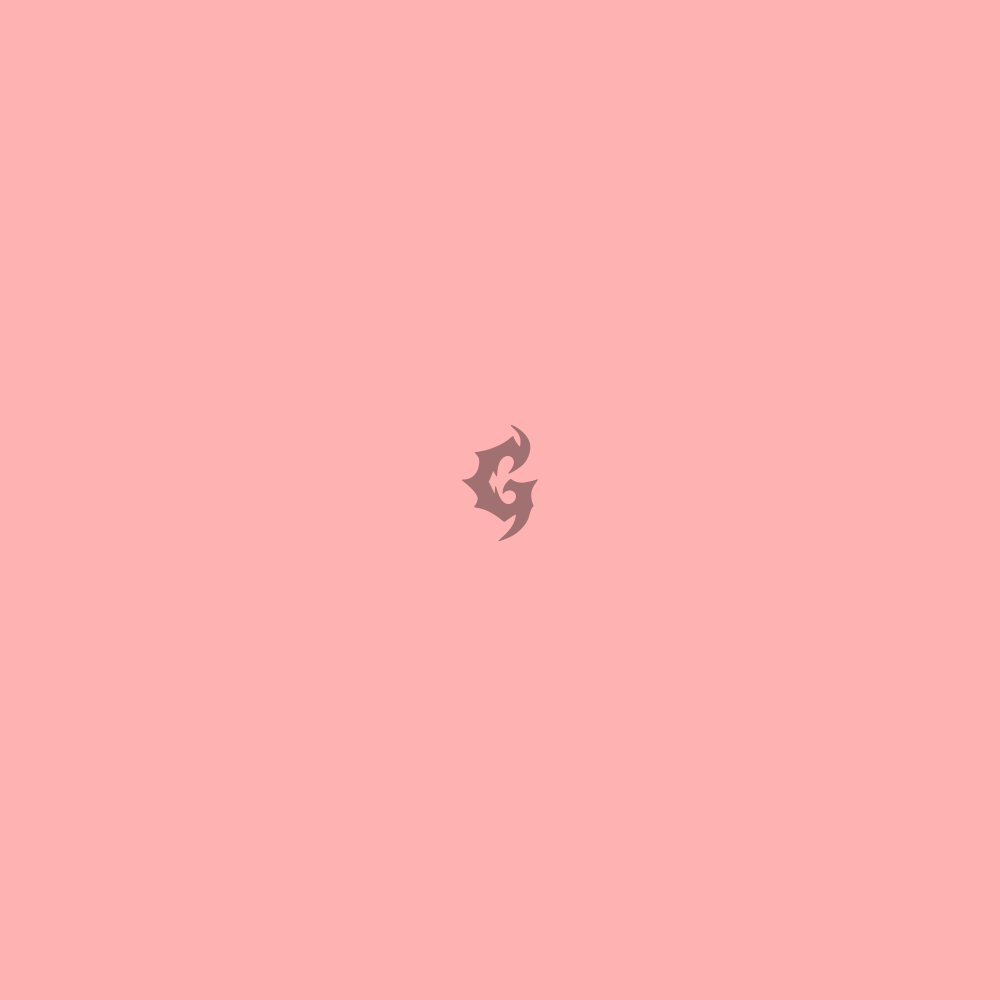
<style>
.page{position:relative;width:1000px;height:1000px;background:#ffb2b2}
.page>*{position:absolute;margin:0}
.t1{font:111.4px "ZeusBorne-Regular";letter-spacing:0.1em;color:#a17070}
</style>
<div class="page">
<p class="t1" style="left:461px;top:425px;width:77px;height:117px">g</p>
</div>
